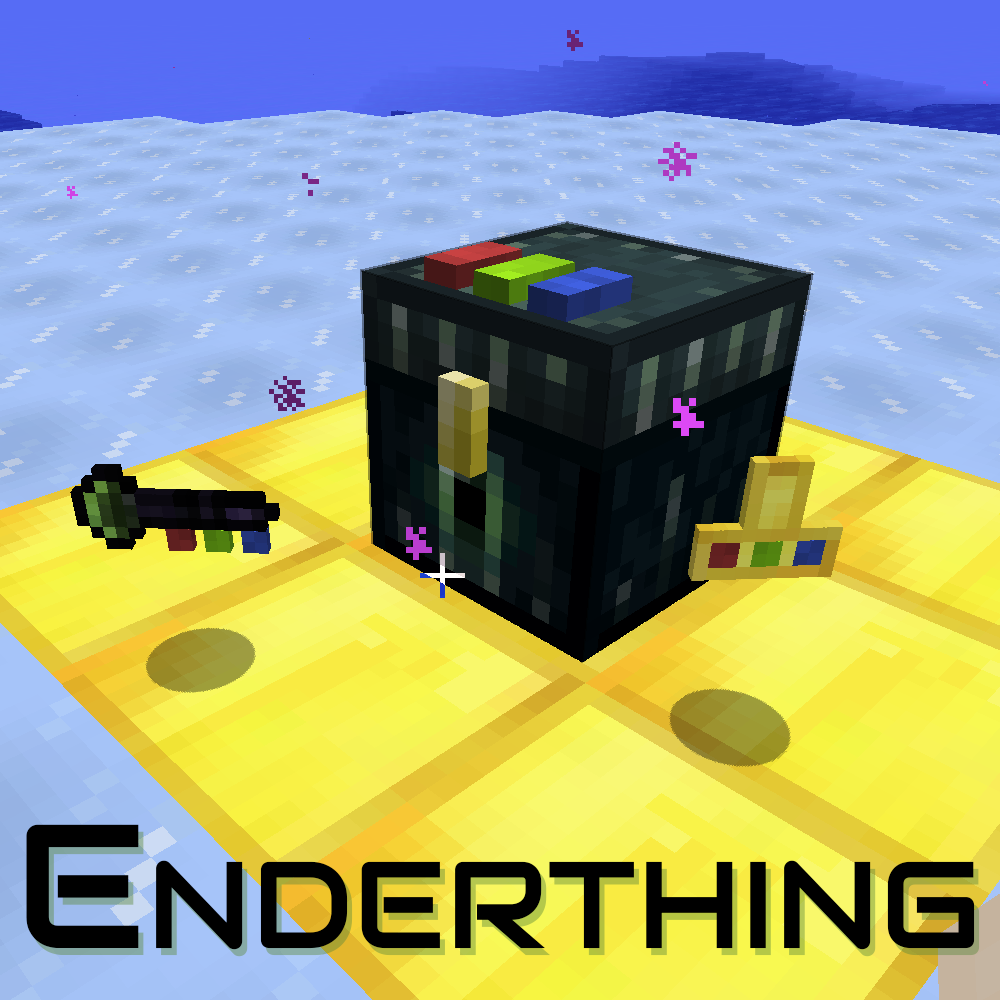
<style>
.page{position:relative;width:1000px;height:1000px}
.page>*{position:absolute;margin:0}
.t1{font:176px "Audiowide-Regular";color:#000000;font-variant:small-caps}
</style>
<div class="page">
<p class="t1" style="left:26px;top:824px;width:949px;height:126px">Enderthing</p>
</div>
